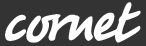
<style>
.page{position:relative;width:146px;height:46px;background:#333333}
.page>*{position:absolute;margin:0}
.t1{font:50px "TatianaC";color:#ffffff}
</style>
<div class="page">
<p class="t1" style="left:5px;top:2px;width:136px;height:41px">cornet</p>
</div>
